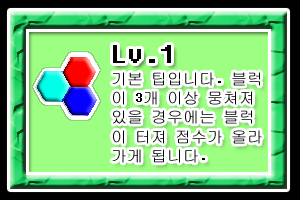
<style>
.page{position:relative;width:300px;height:200px;background:#ffffff}
.page>*{position:absolute;margin:0}
.t1{font:16px "Fixedsys";color:#000000}
.t2{font:32px "Fixedsys";color:#000000}
</style>
<div class="page">
<p class="t1" style="left:112px;top:45px;width:150px;height:118px"><span class="t2">Lv.1<br></span>기본 팁입니다. 블럭<br>이 3개 이상 뭉쳐져<br>있을 경우에는 블럭<br>이 터져 점수가 올라<br>가게 됩니다.</p>
</div>
